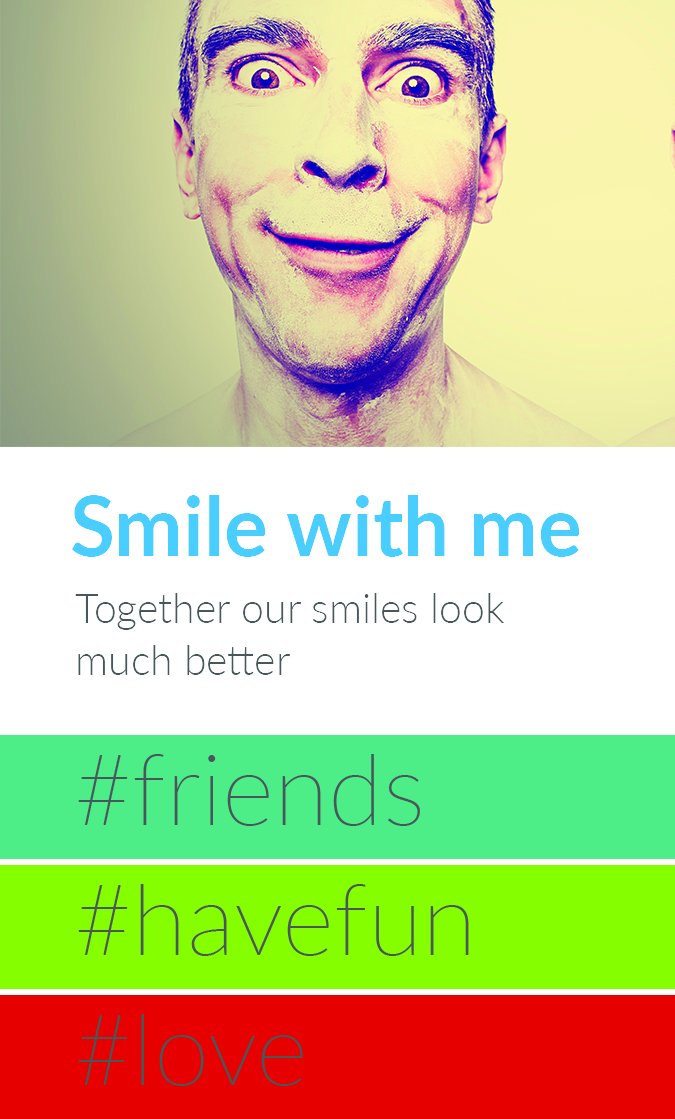
<style>
.page{position:relative;width:675px;height:1119px;background:#ffffff}
.page>*{position:absolute;margin:0}
.t1{font:82px "Lato-Bold";color:#4acdff}
.t2{font:41px/52px "Lato-Light";color:#48585a}
</style>
<div class="page">
<p class="t1" style="left:71px;top:495px;width:509px;height:62px">Smile with me</p>
<p class="t2" style="left:75px;top:593px;width:429px;height:82px;text-align:right">Together our smiles look much better</p>
</div>
